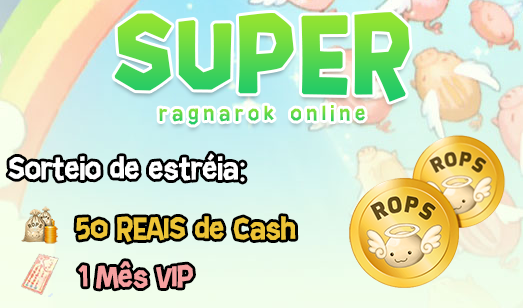
<style>
.page{position:relative;width:523px;height:308px}
.page>*{position:absolute;margin:0}
.t1{font:36px "AnderHedgeRegular";color:#ffffff}
.t2{font:36px "NirmalaUI";color:#ffffff}
.t3{font:36px "AnderHedgeRegular";color:#edc436}
.t4{font:36px "AnderHedgeRegular";color:#f6a0a0}
</style>
<div class="page">
<p class="t1" style="left:8px;top:153px;width:237px;height:29px">Sorteio de estréia<span class="t2">:</span></p>
<p class="t3" style="left:76px;top:216px;width:220px;height:26px">50 REAIS de Cash</p>
<p class="t4" style="left:78px;top:261px;width:115px;height:28px">1 Mês VIP</p>
</div>
